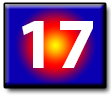
<style>
.page{position:relative;width:111px;height:96px}
.page>*{position:absolute;margin:0}
.t1{font:72px "MyriadPro-Bold";color:#ffffff}
</style>
<div class="page">
<p class="t1" style="left:22px;top:21px;width:71px;height:47px">17</p>
</div>
